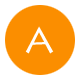
<style>
.page{position:relative;width:80px;height:80px;background:#fb8e00}
.page>*{position:absolute;margin:0}
.t1{font:36px "LithosPro-Regular";color:#fefdfd}
</style>
<div class="page">
<p class="t1" style="left:25px;top:26px;width:29px;height:28px">A</p>
</div>
